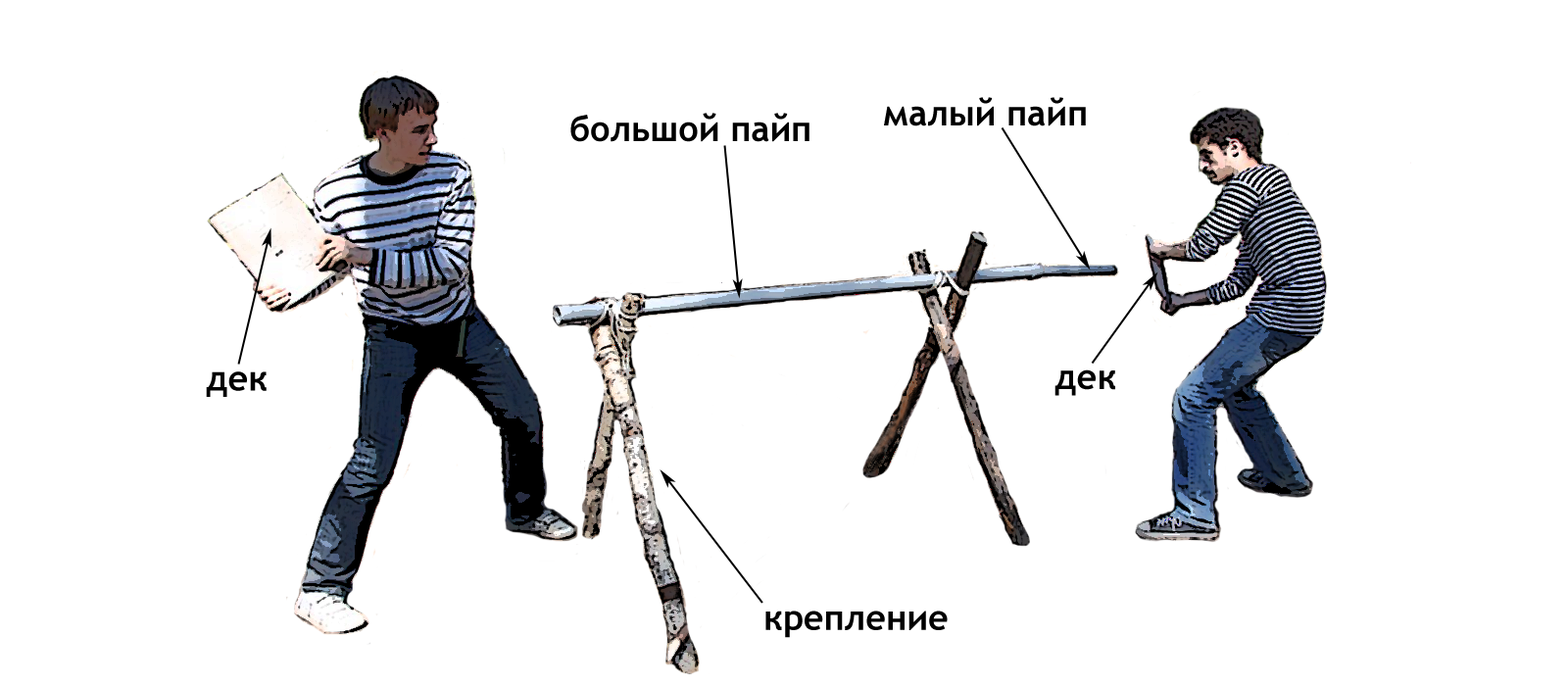
<style>
.page{position:relative;width:1568px;height:686px;background:#ffffff}
.page>*{position:absolute;margin:0}
.t1{font:35.3px "TrebuchetMS-Bold";color:#000000}
</style>
<div class="page">
<p class="t1" style="left:884px;top:97px;width:202px;height:29px">малый пайп</p>
<p class="t1" style="left:570px;top:113px;width:239px;height:29px">большой пайп</p>
<p class="t1" style="left:206px;top:371px;width:61px;height:26px">дек</p>
<p class="t1" style="left:1054px;top:369px;width:61px;height:27px">дек</p>
</div>
